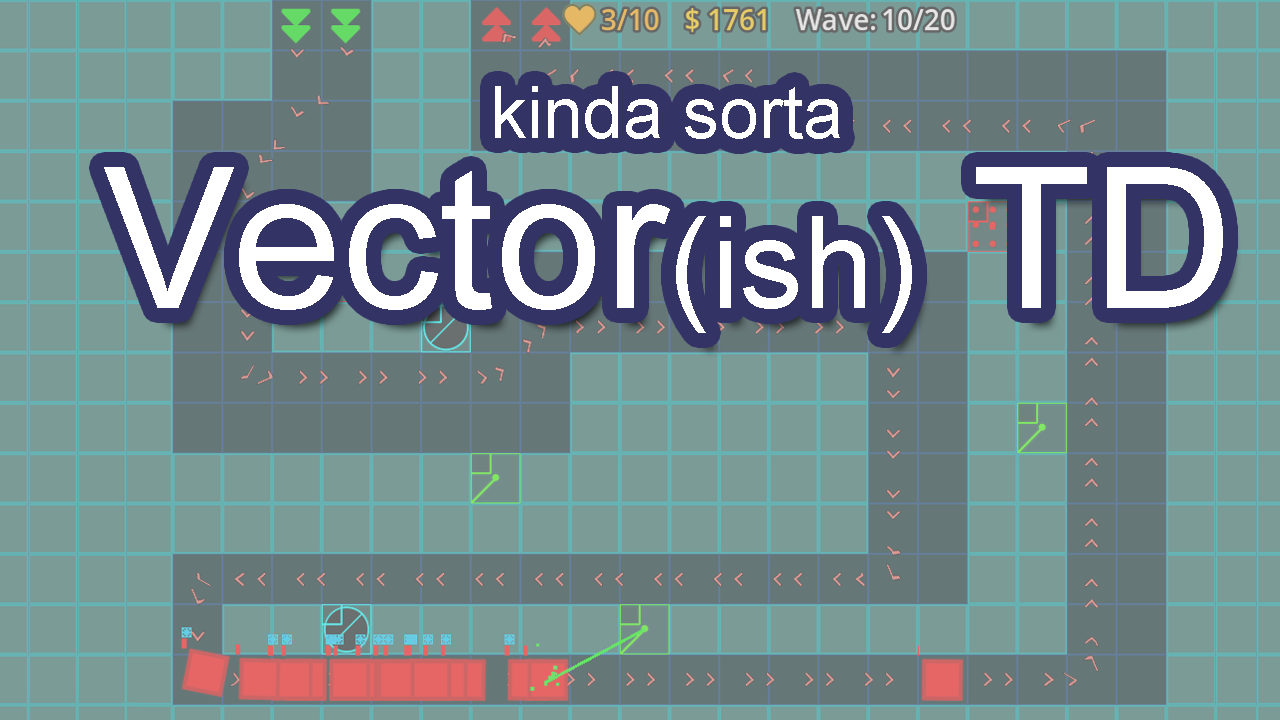
<style>
.page{position:relative;width:1280px;height:720px;background:#7b9b97}
.page>*{position:absolute;margin:0}
.t1{font:72px "ArialMT";color:#ffffff}
.t2{font:196px "ArialMT";color:#ffffff}
.t3{font:128px "ArialMT";color:#ffffff}
</style>
<div class="page">
<p class="t1" style="left:495px;top:86px;width:345px;height:53px">kinda sorta</p>
<p class="t2" style="left:104px;top:167px;width:1119px;height:166px">Vector<span class="t3">(ish)</span> TD</p>
</div>
